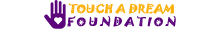
<style>
.page{position:relative;width:199px;height:29px;background:#ffffff}
.page>*{position:absolute;margin:0}
.t1{font:10.9px "Jokerman-Regular";letter-spacing:0.005em;color:#fcb00c;font-weight:bold;scale:1.13 1}
.t2{font:10.9px "Jokerman-Regular";letter-spacing:0.205em;color:#5b047c;font-weight:bold;scale:1.13 1}
</style>
<div class="page">
<p class="t1" style="left:67px;top:3px;width:109px;height:24px">TOUCH A DREAM<br><span class="t2">FOUNDATION</span></p>
</div>
